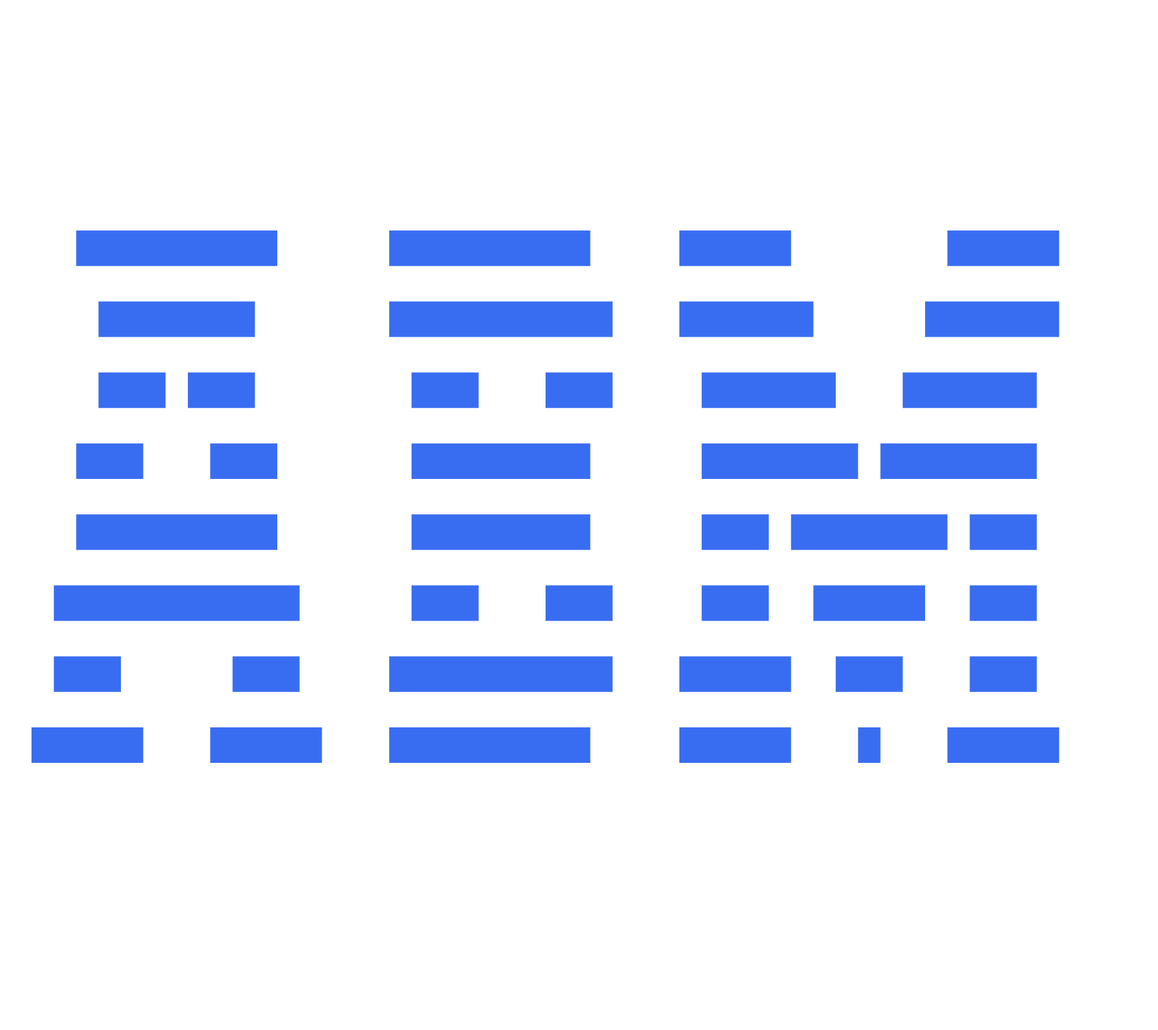
<style>
.page{position:relative;width:1158px;height:1030px;background:#ffffff}
.page>*{position:absolute;margin:0}
.t1{font:567.6px "IBM-Logo";color:#396df1;scale:0.63 1}
</style>
<div class="page">
<p class="t1" style="left:32px;top:230px;width:1028px;height:532px">ABM</p>
</div>
